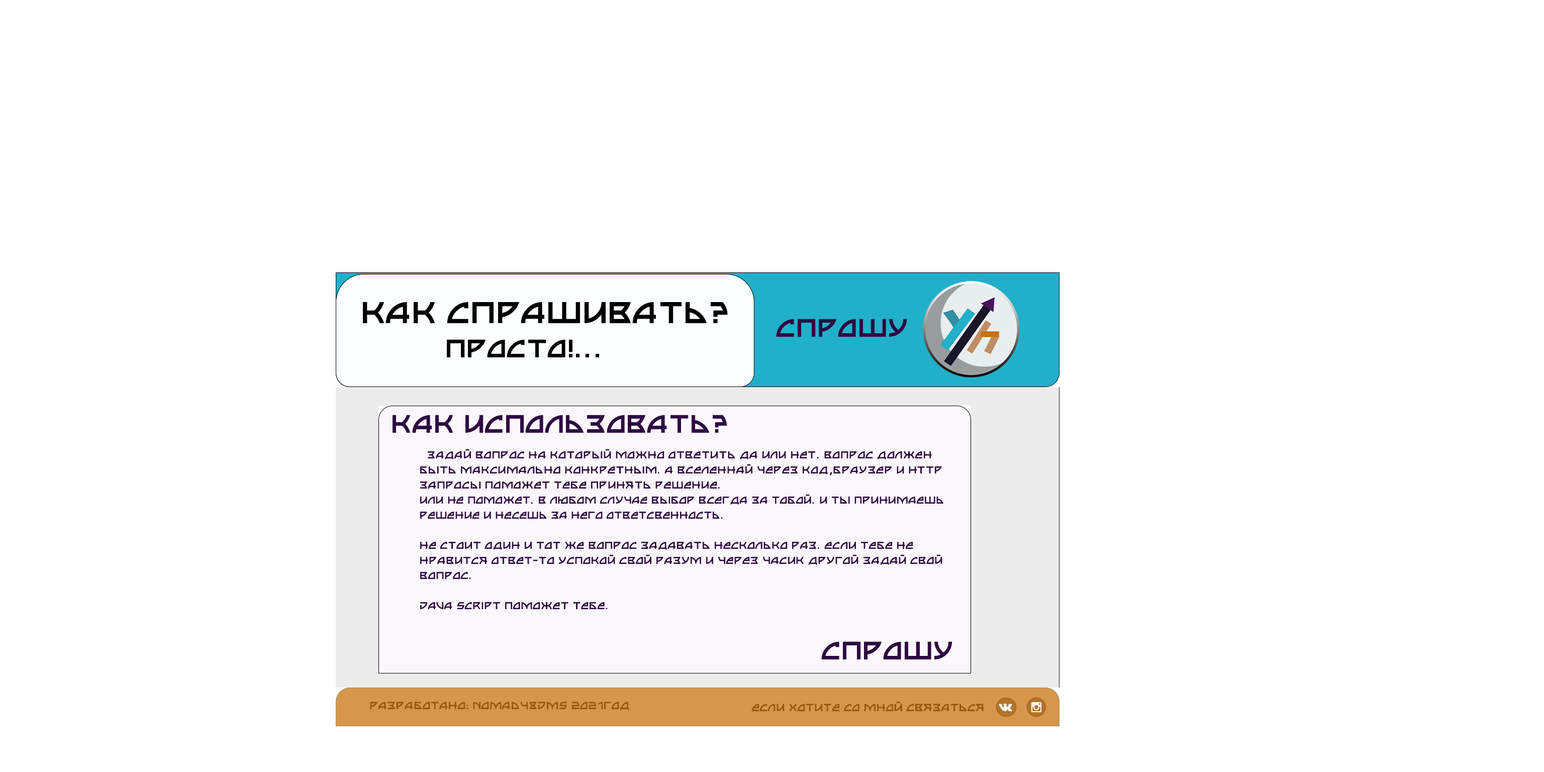
<style>
.page{position:relative;width:1544px;height:772px;background:#ffffff}
.page>*{position:absolute;margin:0}
.t1{font:43.2px "mr_Arounder-Arounder";color:#000000;text-transform:uppercase}
.t2{font:36.2px "mr_Arounder-Arounder";color:#2e0842;text-transform:uppercase}
.t3{font:36.2px "mr_Arounder-Arounder";color:#000000;text-transform:uppercase}
.t4{font:14.5px/15.1px "mr_Arounder-Arounder";color:#2e0842;text-transform:uppercase}
.t5{font:15.1px/9px "mr_Arounder-Arounder";color:#96570c;text-transform:uppercase}
.t6{font:15.1px "mr_Arounder-Arounder";color:#96570c;text-transform:uppercase}
</style>
<div class="page">
<p class="t1" style="left:363px;top:302px;width:365px;height:21px">КАК спрашивать?</p>
<p class="t2" style="left:776px;top:319px;width:131px;height:18px">СПРОШУ</p>
<p class="t3" style="left:447px;top:339px;width:152px;height:18px">просто!...</p>
<p class="t2" style="left:393px;top:415px;width:334px;height:18px">как использовать?</p>
<p class="t4" style="left:420px;top:449px;width:524px;height:160px">Задай вопрос на который можно ответить да или нет. Вопрос должен быть максимально конкретным. А вселеннай через код,браузер и HTTP запросы поможет тебе принять решение.<br>Или не поможет. в любом случае выбор всегда за тобой. и ты принимаешь решение и несешь за него ответсвенность. <br><br>не стоит один и тот же вопрос задавать несколько раз. если тебе не нравится ответ-то успокой свой разум и через часик другой задай свой вопрос. <br><br>Java script поможет тебе.</p>
<p class="t2" style="left:821px;top:641px;width:132px;height:19px">СПРОШУ</p>
<p class="t5" style="left:370px;top:702px;width:259px;height:8px">Разработано: NOMAD48JMS 2021год<br>JMS</p>
<p class="t6" style="left:752px;top:702px;width:232px;height:9px">Если хотите со мной связаться</p>
</div>
